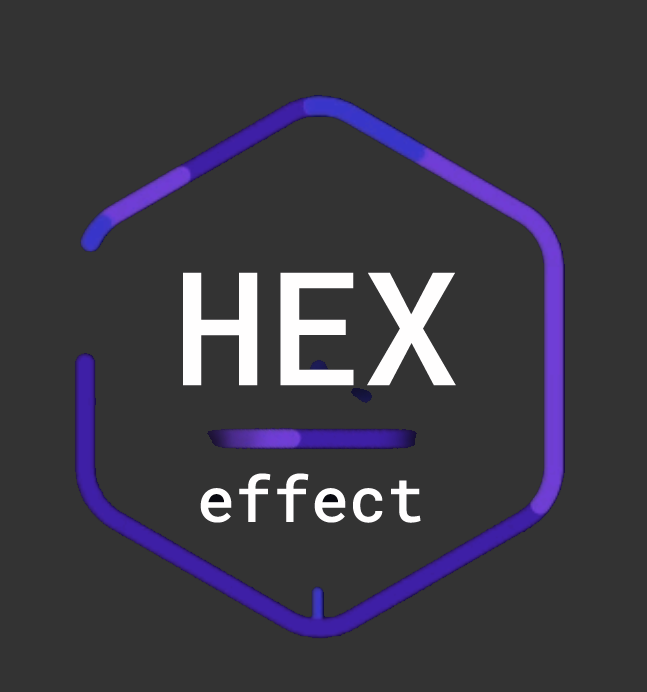
<style>
.page{position:relative;width:647px;height:692px;background:#333333}
.page>*{position:absolute;margin:0}
.t1{font:158px "RobotoMono-Medium";color:#fffefe}
.t2{font:63px "RobotoMono-Medium";color:#fffefe}
</style>
<div class="page">
<p class="t1" style="left:183px;top:272px;width:273px;height:114px">HEX</p>
<p class="t2" style="left:200px;top:473px;width:221px;height:50px">effect</p>
</div>
